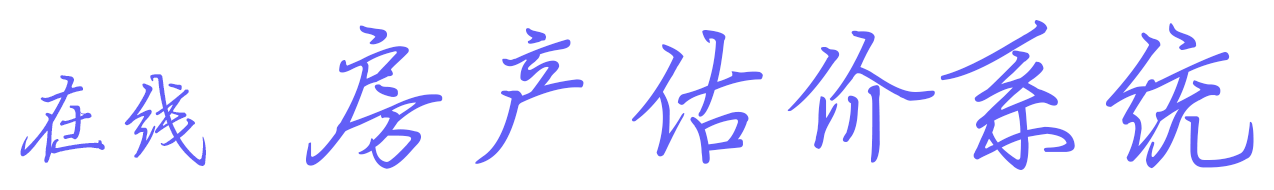
<style>
.page{position:relative;width:1274px;height:190px;background:#ffffff}
.page>*{position:absolute;margin:0}
.t1{font:160px "Jyinbixinsu";color:#625ff7}
.t2{font:100px "Jyinbixinsu";color:#625ff7}
</style>
<div class="page">
<p class="t1" style="left:20px;top:20px;width:1234px;height:150px"><span class="t2">在线</span>  房产估价系统</p>
</div>
